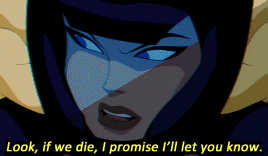
<style>
.page{position:relative;width:268px;height:156px;background:#000000}
.page>*{position:absolute;margin:0}
.t1{font:14px "Calibri";color:#fffd52;font-weight:bold;font-style:italic}
</style>
<div class="page">
<p class="t1" style="left:6px;top:141px;width:256px;height:13px">Look, if we die, I promise I’ll let you know.</p>
</div>
